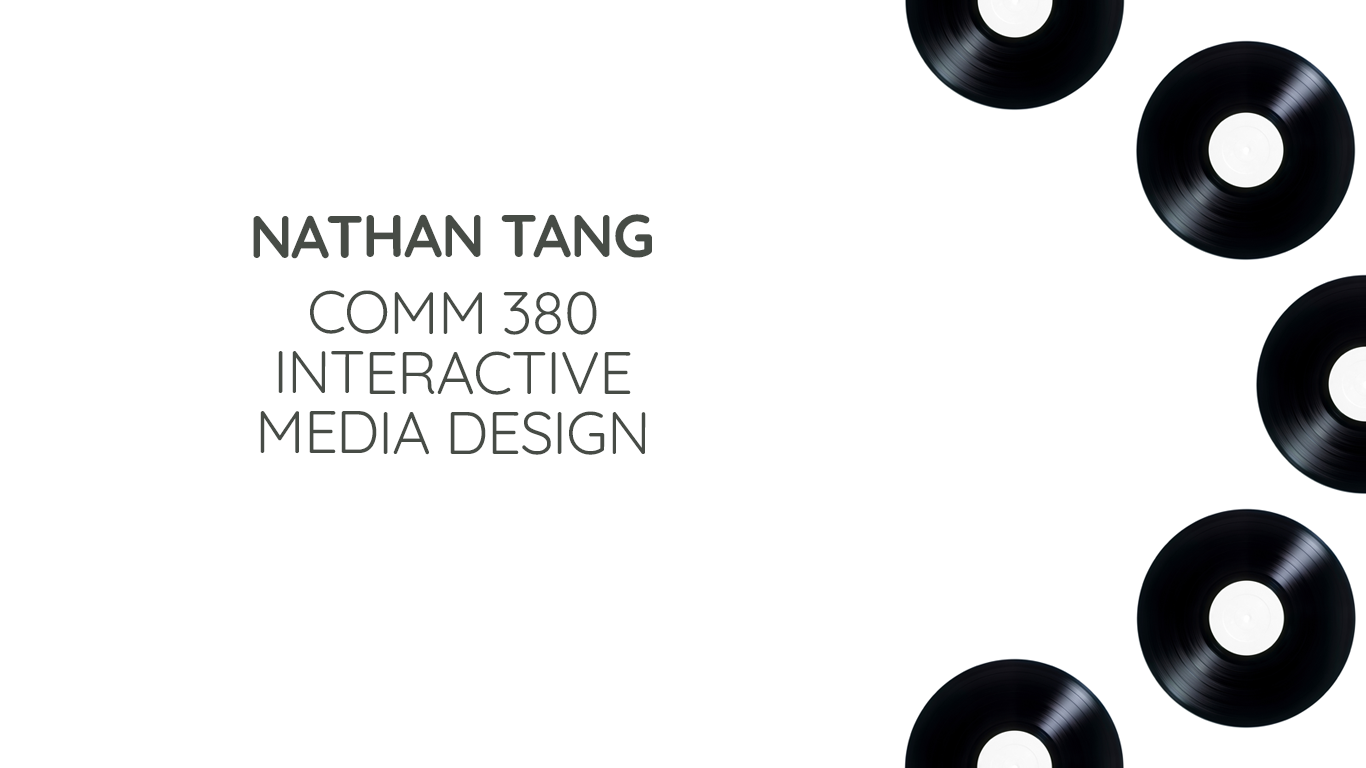
<style>
.page{position:relative;width:1366px;height:768px;background:#ffffff}
.page>*{position:absolute;margin:0}
.t1{font:60px "Quicksand-Bold";letter-spacing:-0.02em;color:#474c46;text-transform:uppercase}
.t2{font:60px/60px "Quicksand-Regular";letter-spacing:-0.02em;color:#474c46;text-transform:uppercase}
</style>
<div class="page">
<p class="t1" style="left:253px;top:214px;width:399px;height:45px">Nathan Tang</p>
<p class="t2" style="left:260px;top:290px;width:386px;height:165px;text-align:center">COMM 380 <br>INTERACTIVE <br>MEDIA DESIGN</p>
</div>
